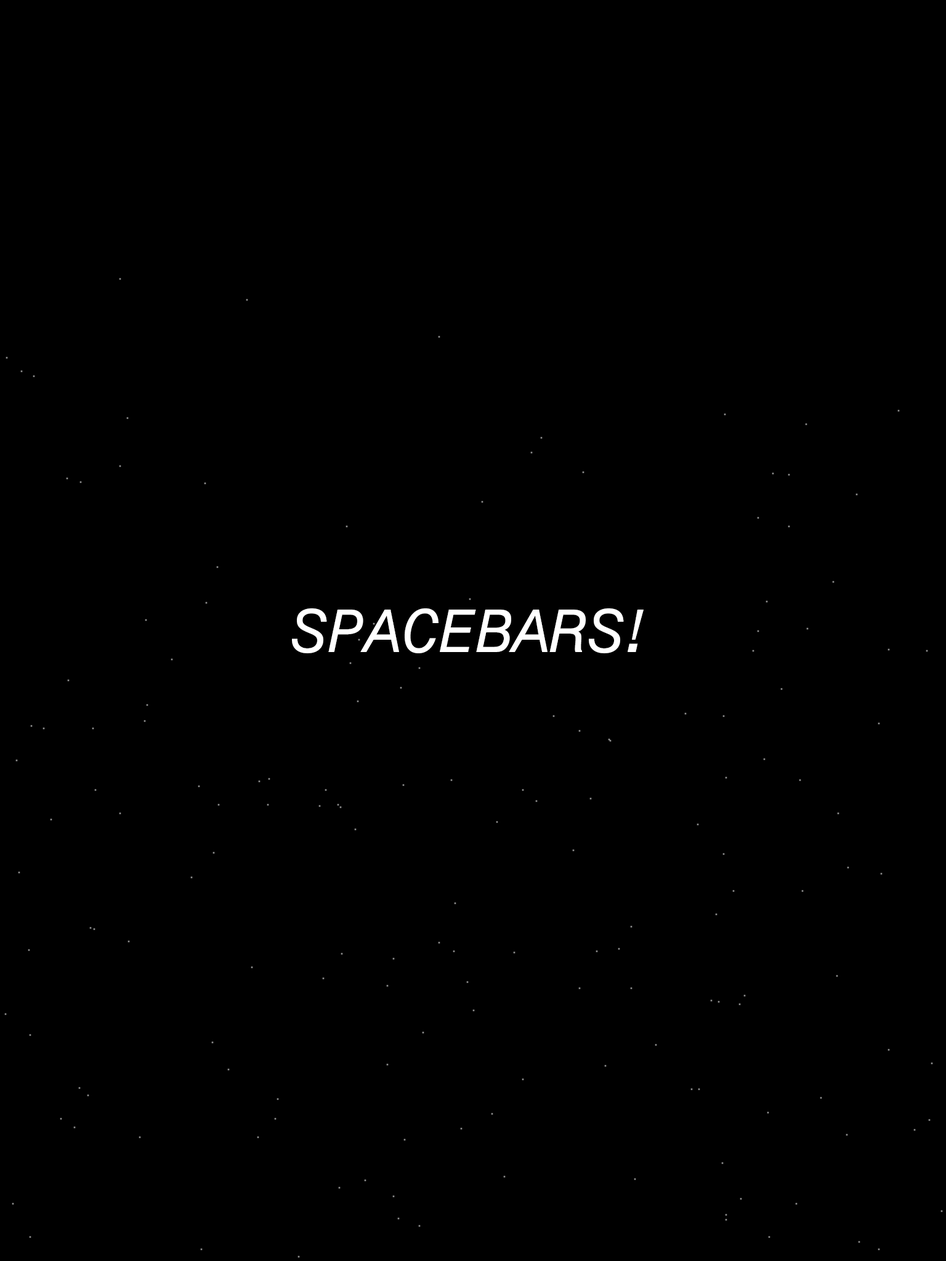
<style>
.page{position:relative;width:946px;height:1261px;background:#000000}
.page>*{position:absolute;margin:0}
.t1{font:61.6px "Monospace821BT-Italic";color:#ffffff}
.t2{font:61.6px "Monospace821BT-Italic";letter-spacing:-0.1em;color:#ffffff}
</style>
<div class="page">
<p class="t1" style="left:292px;top:608px;width:351px;height:45px">SPACEBAR<span class="t2">S!</span></p>
</div>
